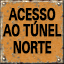
<style>
.page{position:relative;width:64px;height:64px}
.page>*{position:absolute;margin:0}
.t1{font:12px/16.7px "UniversNextPro-Bold";letter-spacing:-0.04em;color:#000000;text-transform:uppercase;font-weight:bold;scale:0.7 1}
</style>
<div class="page">
<p class="t1" style="left:2px;top:8px;width:60px;height:46px;text-align:center">Acesso<br>ao túnel<br>norte</p>
</div>
